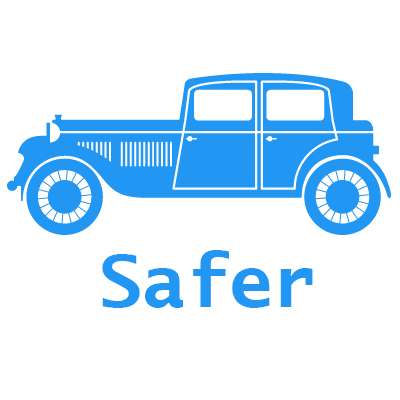
<style>
.page{position:relative;width:400px;height:400px;background:#ffffff}
.page>*{position:absolute;margin:0}
.t1{font:72px "LucidaSans-TypewriterBold";color:#2196f3}
</style>
<div class="page">
<p class="t1" style="left:102px;top:250px;width:211px;height:58px">Safer</p>
</div>
